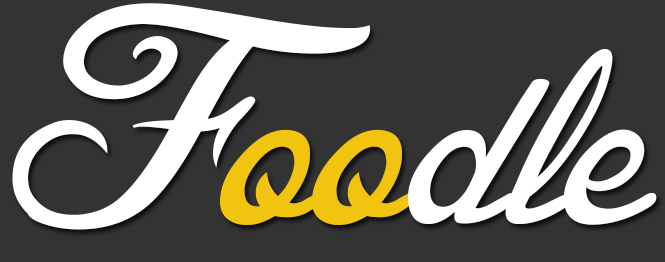
<style>
.page{position:relative;width:665px;height:262px;background:#333333}
.page>*{position:absolute;margin:0}
.t1{font:400px "BlessedDay";color:#ffffff}
.t2{font:400px "BlessedDay";color:#f1c40f}
</style>
<div class="page">
<p class="t1" style="left:12px;top:3px;width:645px;height:227px">F<span class="t2">oo</span>dle</p>
</div>
